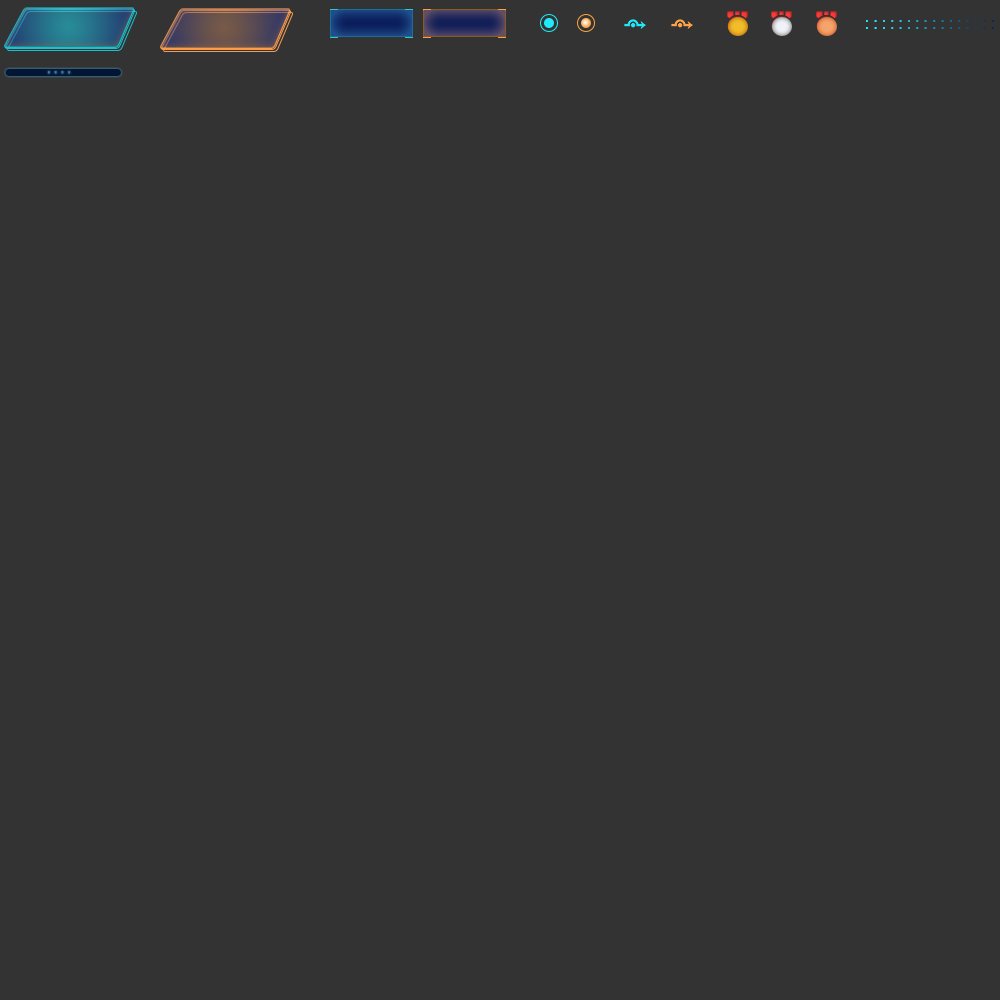
<style>
.page{position:relative;width:1000px;height:1000px;background:#333333}
.page>*{position:absolute;margin:0}
.t1{font:13.8px/6.9px "DigifaceWide";letter-spacing:0.4em}
.t2{font:12px "MicrosoftYaHei";letter-spacing:0.3em;color:#4f70a6;font-weight:bold}
</style>
<div class="page">
<p class="t1" style="left:866px;top:20px;width:128px;height:9px;text-align:center">................<br>................</p>
<p class="t2" style="left:47px;top:71px;width:24px;height:3px">....</p>
</div>
